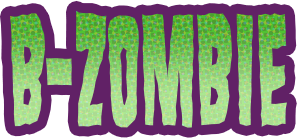
<style>
.page{position:relative;width:297px;height:138px;background:#612166}
.page>*{position:absolute;margin:0}
.t1{font:140.2px "SamdanEvilCondensed"}
</style>
<div class="page">
<p class="t1" style="left:10px;top:10px;width:277px;height:118px">B-zombie</p>
</div>
